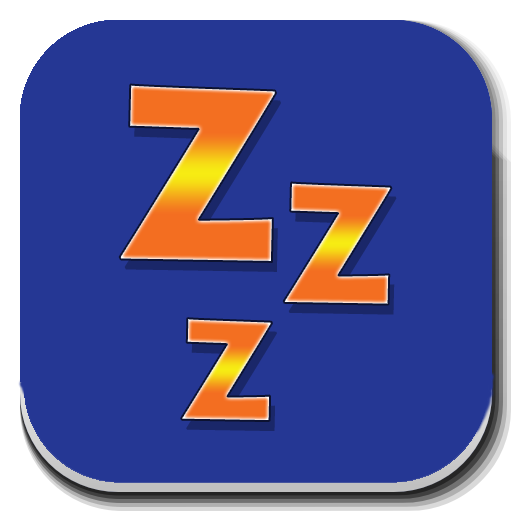
<style>
.page{position:relative;width:512px;height:512px;background:#253794}
.page>*{position:absolute;margin:0}
.t1{font:239.7px "LithosPro-Black"}
.t2{font:164.9px "LithosPro-Black"}
.t3{font:138.9px "LithosPro-Black"}
</style>
<div class="page">
<p class="t1" style="left:119px;top:84px;width:157px;height:178px">Z</p>
<p class="t2" style="left:283px;top:182px;width:109px;height:123px">Z</p>
<p class="t3" style="left:181px;top:318px;width:91px;height:103px">Z</p>
</div>
